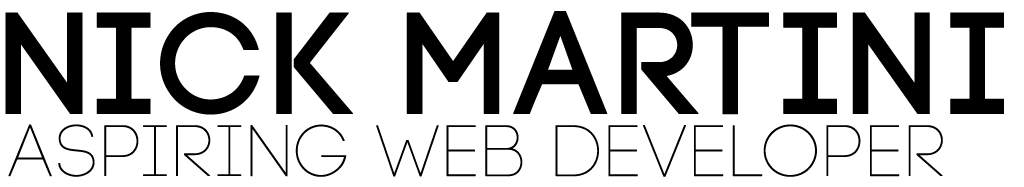
<style>
.page{position:relative;width:1024px;height:187px;background:#ffffff}
.page>*{position:absolute;margin:0}
.t1{font:144px "Code-Pro-Demo";color:#000000;font-weight:bold}
.t2{font:72px "Code-Pro-Light-Demo";color:#000000;font-weight:bold}
</style>
<div class="page">
<p class="t1" style="left:5px;top:11px;width:999px;height:104px">Nick martini</p>
<p class="t2" style="left:8px;top:124px;width:935px;height:53px">Aspiring Web Developer</p>
</div>
